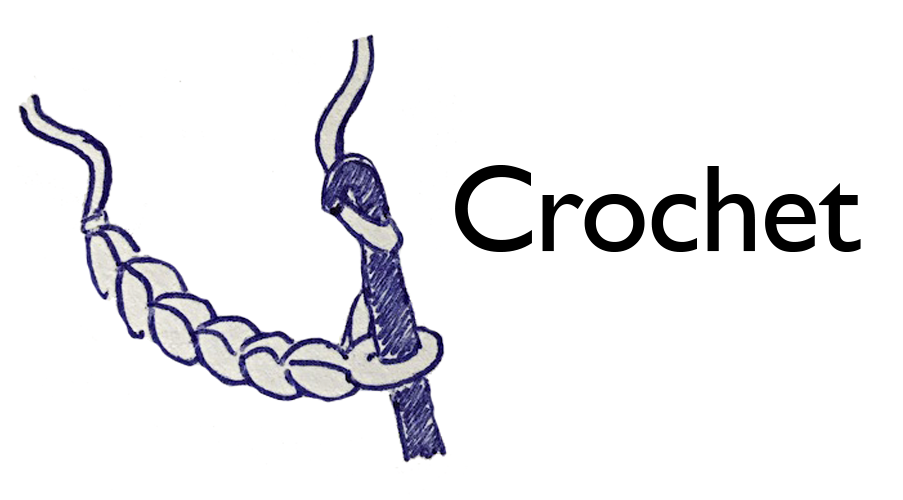
<style>
.page{position:relative;width:903px;height:500px;background:#ffffff}
.page>*{position:absolute;margin:0}
.t1{font:125px "GillSans";color:#000000}
</style>
<div class="page">
<p class="t1" style="left:455px;top:165px;width:406px;height:87px">Crochet</p>
</div>
